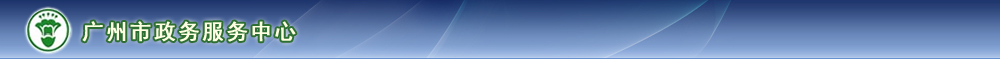
<style>
.page{position:relative;width:1000px;height:59px}
.page>*{position:absolute;margin:0}
.t1{font:21.5px "SimHei";letter-spacing:0.1em;color:#feffe2;font-weight:bold}
</style>
<div class="page">
<p class="t1" style="left:82px;top:21px;width:214px;height:21px">广州市政务服务中心</p>
</div>
